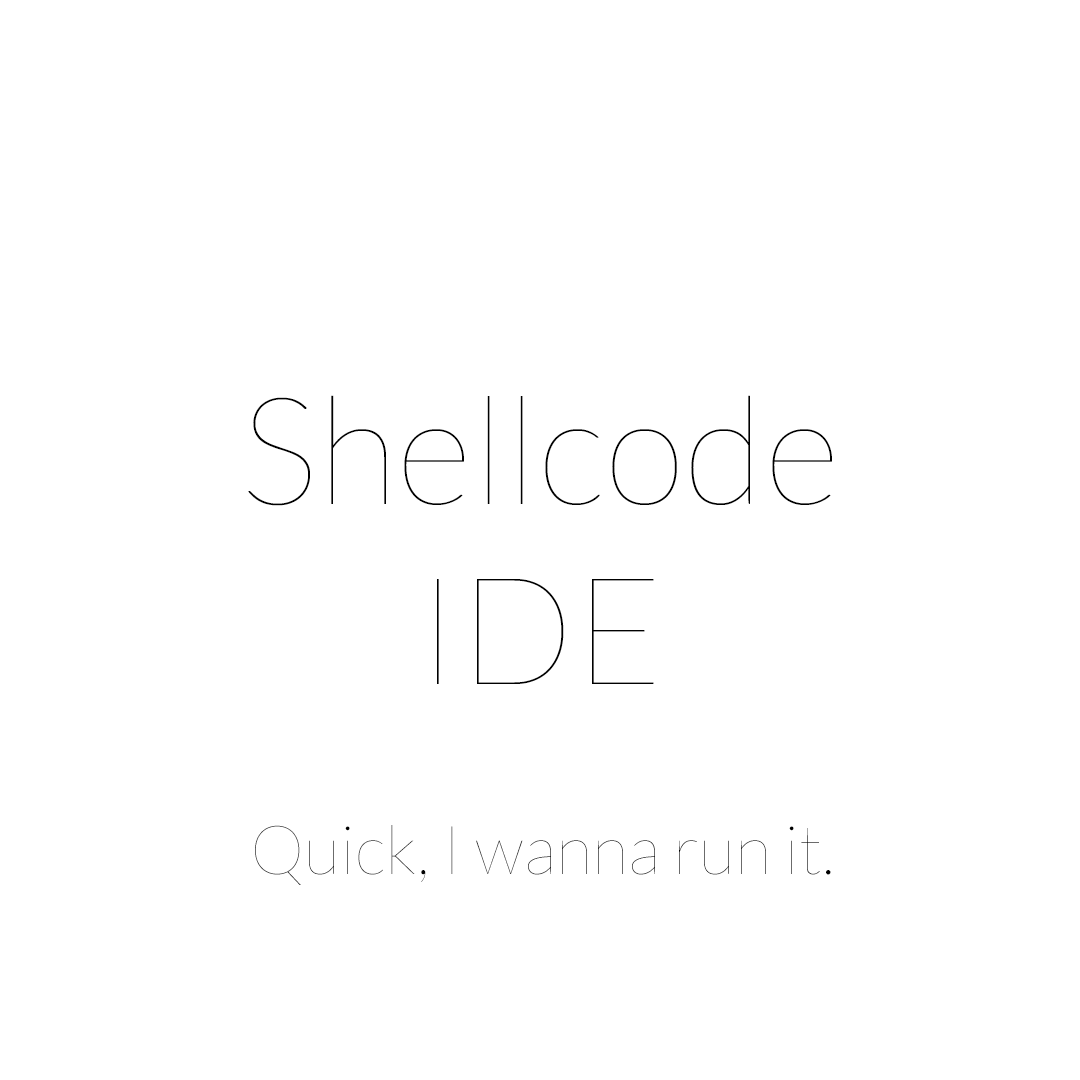
<style>
.page{position:relative;width:1080px;height:1080px;background:#ffffff}
.page>*{position:absolute;margin:0}
.t1{font:150px "Lato-Hairline";color:#000000}
.t2{font:68px "Lato-Hairline";color:#000000}
</style>
<div class="page">
<p class="t1" style="left:248px;top:395px;width:584px;height:289px;text-align:center">Shellcode<br>IDE</p>
<p class="t2" style="left:255px;top:825px;width:576px;height:60px">Quick, I wanna run it.</p>
</div>
